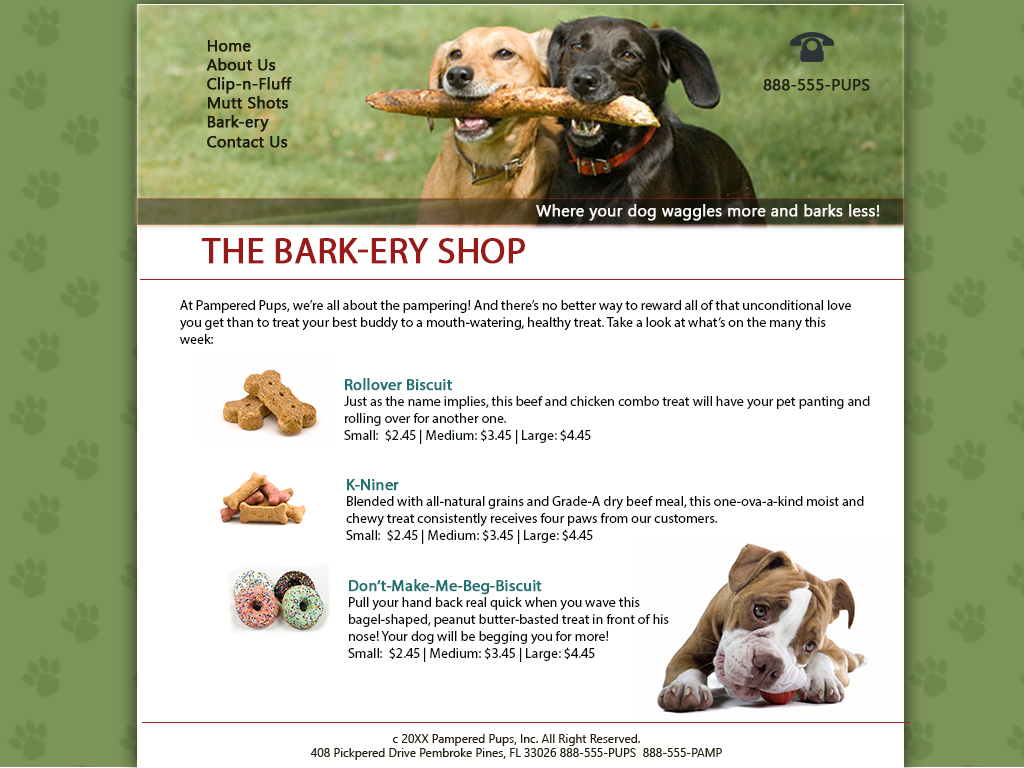
<style>
.page{position:relative;width:1024px;height:768px;background:#ffffff}
.page>*{position:absolute;margin:0}
.t1{font:16px "SegoeUI";color:#1a180b;font-weight:bold}
.t2{font:16px "SegoeUI";color:#242214;font-weight:bold}
.t3{font:16px "SegoeUI";color:#ffffff;font-weight:bold}
.t4{font:16px "SegoeUI";color:#fcf9f9;font-weight:bold}
.t5{font:36px "MyriadPro-Regular";color:#981b1a;text-transform:uppercase;font-weight:bold}
.t6{font:14px "MyriadPro-Regular";color:#020404}
.t7{font:14px "MyriadPro-Regular";color:#060e0e}
.t8{font:16px "MyriadPro-Regular";color:#207272;font-weight:bold}
.t9{font:14px "MyriadPro-Regular";color:#030505}
.t10{font:14px "MyriadPro-Regular";color:#040909}
.t11{font:14px "MyriadPro-Regular";color:#070909}
.t12{font:12px "SegoeUI";color:#241e10}
</style>
<div class="page">
<p class="t1" style="left:206px;top:40px;width:86px;height:108px">Home<br>About Us<br>Clip-n-Fluff<br>Mutt Shots<br>Bark-ery<br>Contact Us</p>
<p class="t2" style="left:763px;top:79px;width:107px;height:12px"><span class="t3"><br></span>888-555-PUPS</p>
<p class="t4" style="left:536px;top:204px;width:344px;height:17px">Where your dog waggles more and barks less!</p>
<p class="t5" style="left:201px;top:238px;width:324px;height:26px">the bark-ery shop</p>
<p class="t6" style="left:180px;top:300px;width:671px;height:44px">At Pampered Pups, we’re all about the pampering! And there’s no better way to reward all of that unconditional love you get than to treat your best buddy to a mouth-watering, healthy treat. Take a look at what’s on the many this week:</p>
<p class="t7" style="left:344px;top:378px;width:526px;height:66px"><span class="t8">Rollover Biscuit<br></span>Just as the name implies, this beef and chicken combo treat will have your pet panting and rolling over for another one.<br>Small:  $2.45 | Medium: $3.45 | Large: $4.45</p>
<p class="t9" style="left:346px;top:479px;width:518px;height:65px"><span class="t8">K-Niner<br></span>Blended with all-natural grains and Grade-A dry beef meal, this one-ova-a-kind moist and chewy treat consistently receives four paws from our customers.<br><span class="t10">Small:  $2.45 | Medium: $3.45 | Large: $4.45</span></p>
<p class="t11" style="left:348px;top:579px;width:321px;height:83px"><span class="t8">Don’t-Make-Me-Beg-Biscuit<br></span>Pull your hand back real quick when you wave this bagel-shaped, peanut butter-basted treat in front of his nose! Your dog will be begging you for more!<br>Small:  $2.45 | Medium: $3.45 | Large: $4.45</p>
<p class="t12" style="left:310px;top:734px;width:412px;height:26px;text-align:center">c 20XX Pampered Pups, Inc. All Right Reserved.<br>408 Pickpered Drive Pembroke Pines, FL 33026 888-555-PUPS  888-555-PAMP</p>
</div>
